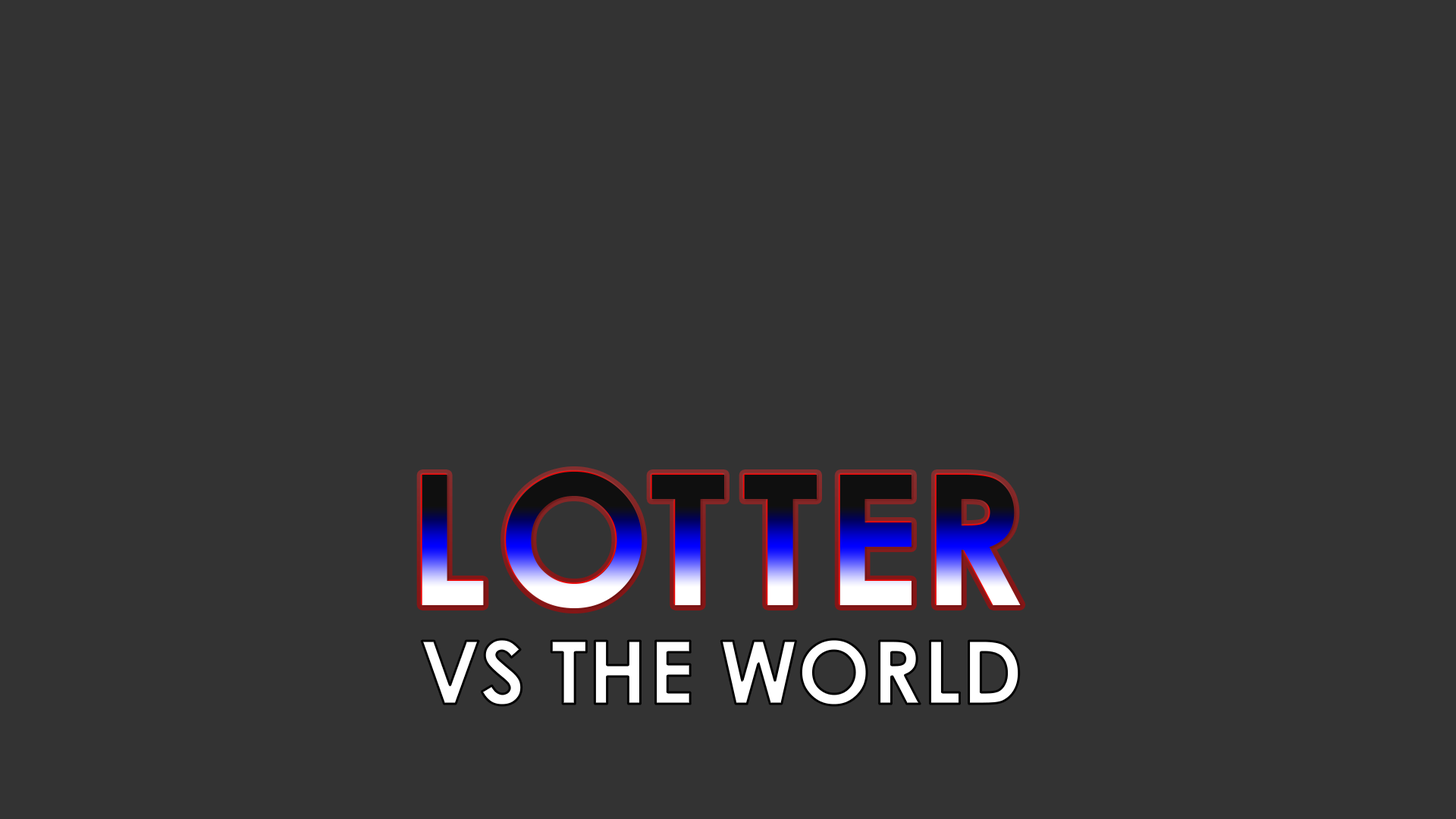
<style>
.page{position:relative;width:1456px;height:819px;background:#333333}
.page>*{position:absolute;margin:0}
.t1{font:182px "CenturyGothic-Bold"}
.t2{font:87.8px "CenturyGothic-Bold";color:#ffffff}
</style>
<div class="page">
<p class="t1" style="left:506px;top:472px;width:136px;height:136px">O</p>
<p class="t1" style="left:422px;top:475px;width:62px;height:130px">L</p>
<p class="t1" style="left:651px;top:475px;width:73px;height:130px">T</p>
<p class="t1" style="left:744px;top:475px;width:73px;height:130px">T</p>
<p class="t1" style="left:839px;top:475px;width:73px;height:130px">E</p>
<p class="t1" style="left:936px;top:475px;width:85px;height:130px">R</p>
<p class="t2" style="left:422px;top:639px;width:597px;height:66px">VS THE WORLD</p>
</div>
